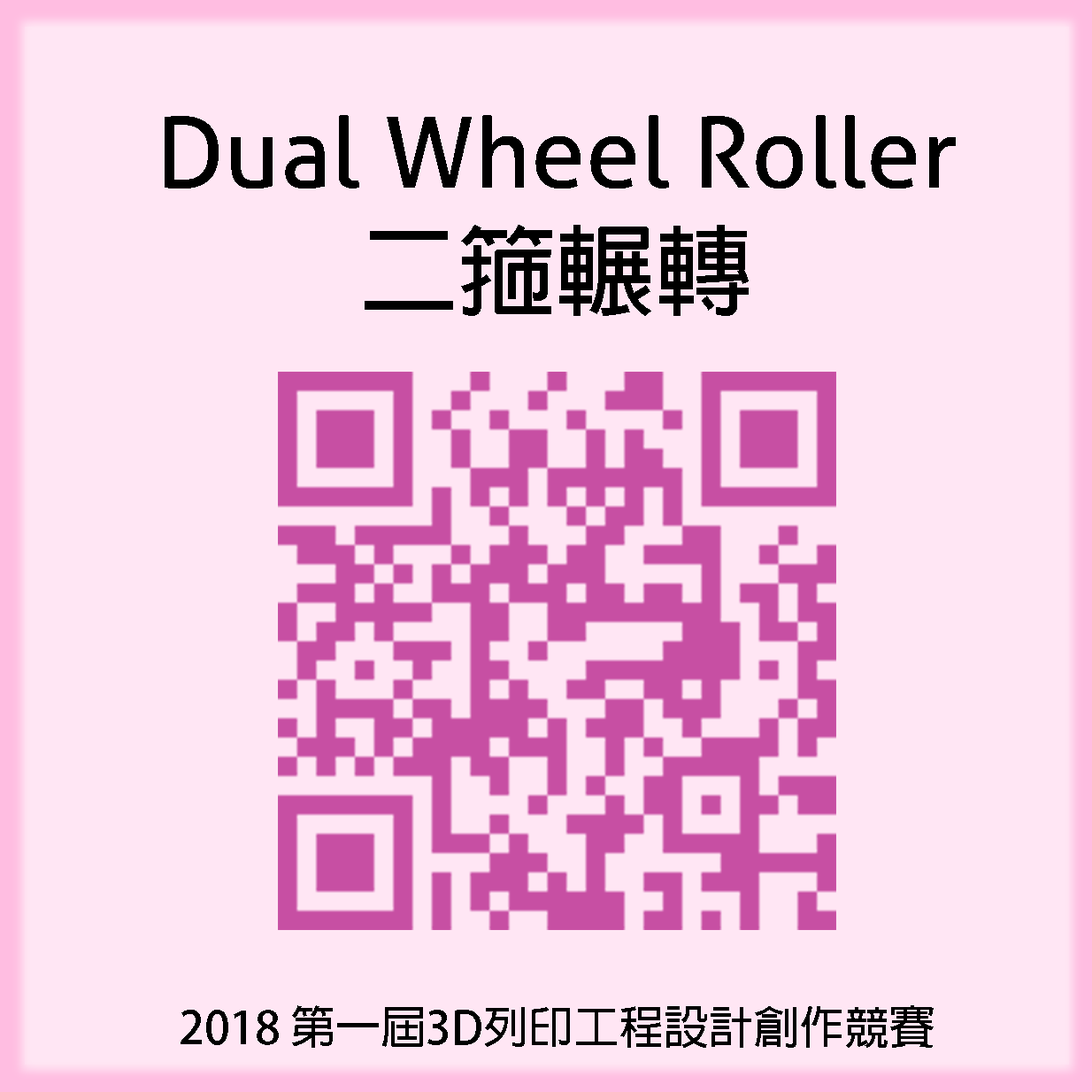
<style>
.page{position:relative;width:1092px;height:1092px;background:#ffe6f4}
.page>*{position:absolute;margin:0}
.t1{font:98.2px "Aller";color:#000000}
.t2{font:98.2px "AdobeFanHeitiStd-Bold";color:#000000}
.t3{font:45.1px "AdobeFanHeitiStd-Bold";color:#000000}
</style>
<div class="page">
<p class="t1" style="left:165px;top:115px;width:791px;height:73px">Dual Wheel Roller</p>
<p class="t2" style="left:365px;top:225px;width:384px;height:91px">二箍輾轉</p>
<p class="t3" style="left:181px;top:1005px;width:753px;height:43px">2018 第一屆3D列印工程設計創作競賽</p>
</div>
